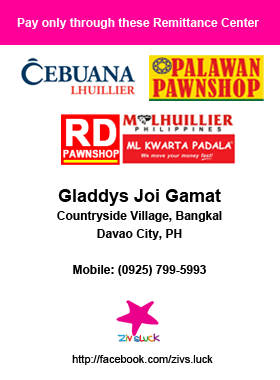
<style>
.page{position:relative;width:280px;height:380px;background:#ffffff}
.page>*{position:absolute;margin:0}
.t1{font:12px "Arial-BoldMT";color:#ffffff}
.t2{font:12px/18px "Arial-BoldMT";color:#000000}
.t3{font:18px/18px "Arial-BoldMT";color:#000000}
.t4{font:11px "ArialMT";color:#000000}
</style>
<div class="page">
<p class="t1" style="left:17px;top:18px;width:242px;height:11px">Pay only through these Remittance Center</p>
<p class="t2" style="left:57px;top:189px;width:165px;height:87px;text-align:center"><span class="t3">Gladdys Joi Gamat<br></span>Countryside Village, Bangkal<br>Davao City, PH<br><br>Mobile: (0925) 799-5993</p>
<p class="t4" style="left:72px;top:355px;width:141px;height:10px">http://facebook.com/zivs.luck</p>
</div>
